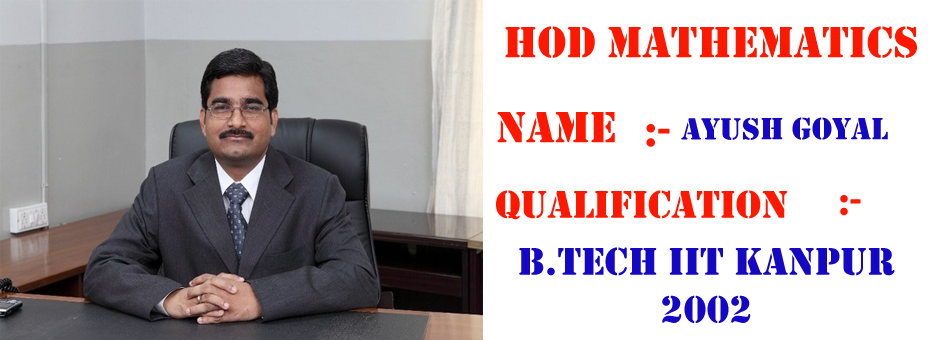
<style>
.page{position:relative;width:940px;height:340px;background:#ffffff}
.page>*{position:absolute;margin:0}
.t1{font:45.3px "Stencil";color:#ff1800}
.t2{font:32px "Stencil";color:#1508c5}
.t3{font:40px "Stencil";color:#ff1800}
.t4{font:40px "Stencil";color:#1508c5}
</style>
<div class="page">
<p class="t1" style="left:505px;top:26px;width:412px;height:32px">HOD MATHEMATICS</p>
<p class="t1" style="left:497px;top:112px;width:118px;height:31px">NAME</p>
<p class="t1" style="left:646px;top:124px;width:24px;height:23px">-:</p>
<p class="t2" style="left:681px;top:117px;width:207px;height:23px">AYUSH GOYAL</p>
<p class="t3" style="left:496px;top:190px;width:292px;height:30px">qualification</p>
<p class="t3" style="left:840px;top:195px;width:21px;height:21px">-:</p>
<p class="t4" style="left:519px;top:247px;width:376px;height:76px;text-align:center">B.Tech iit kanpur 2002</p>
</div>
